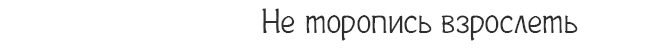
<style>
.page{position:relative;width:669px;height:50px;background:#ffffff}
.page>*{position:absolute;margin:0}
.t1{font:35px "Plainot";color:#2e2e2e}
</style>
<div class="page">
<p class="t1" style="left:262px;top:8px;width:316px;height:33px">Не торопись взрослеть</p>
</div>
